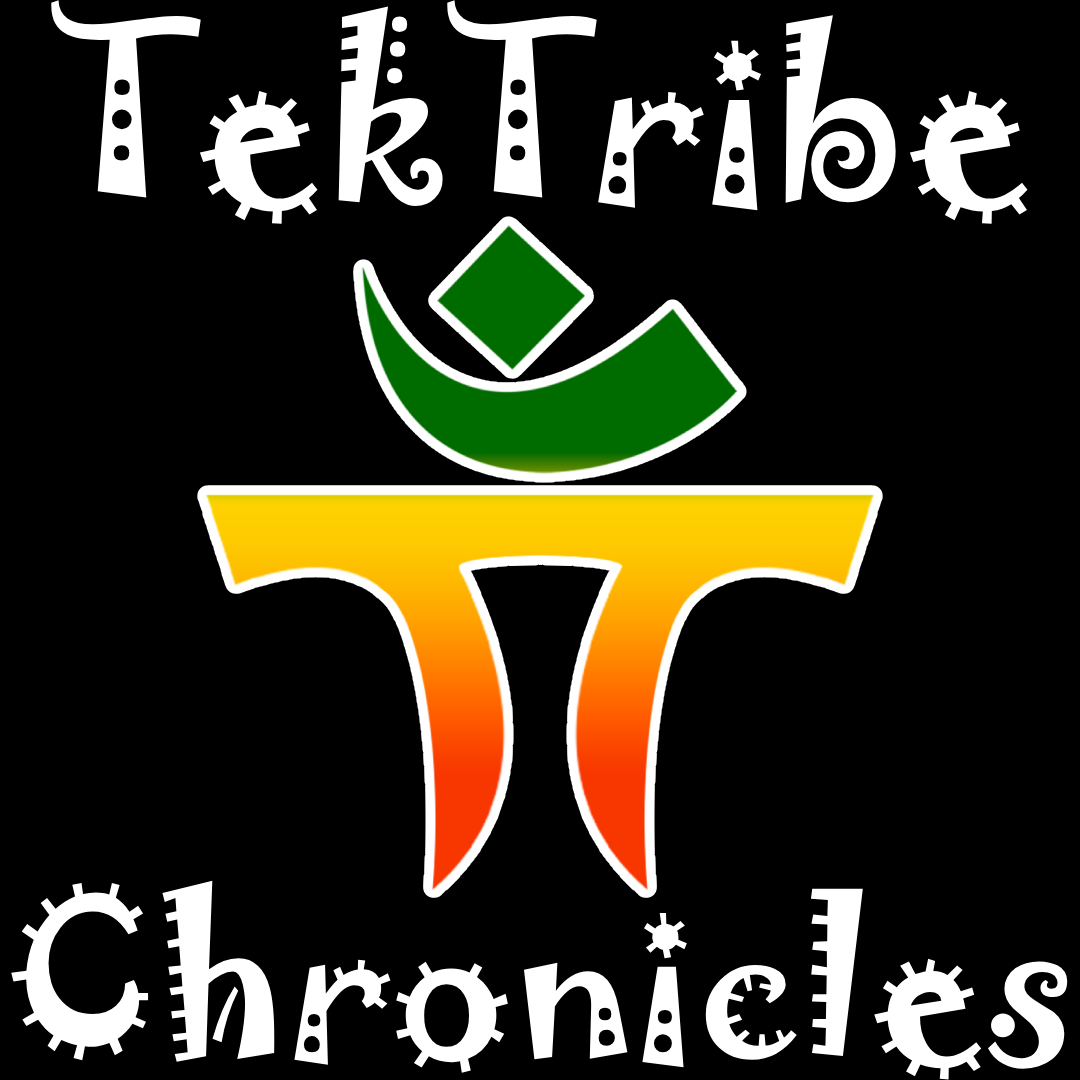
<style>
.page{position:relative;width:1080px;height:1080px;background:#000000}
.page>*{position:absolute;margin:0}
.t1{font:220px "Jokerman-Regular";color:#ffffff}
.t2{font:200px "Jokerman-Regular";color:#ffffff}
</style>
<div class="page">
<p class="t1" style="left:51px;top:0px;width:977px;height:224px">TekTribe</p>
<p class="t2" style="left:11px;top:880px;width:1057px;height:200px">Chronicles</p>
</div>
